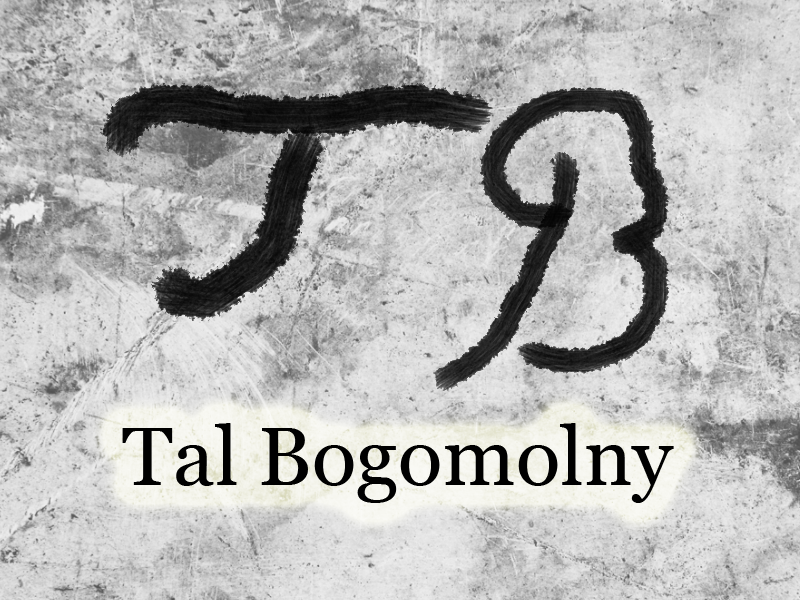
<style>
.page{position:relative;width:800px;height:600px}
.page>*{position:absolute;margin:0}
.t1{font:82.5px "Georgia";color:#000000}
</style>
<div class="page">
<p class="t1" style="left:122px;top:423px;width:552px;height:80px">Tal Bogomolny</p>
</div>
